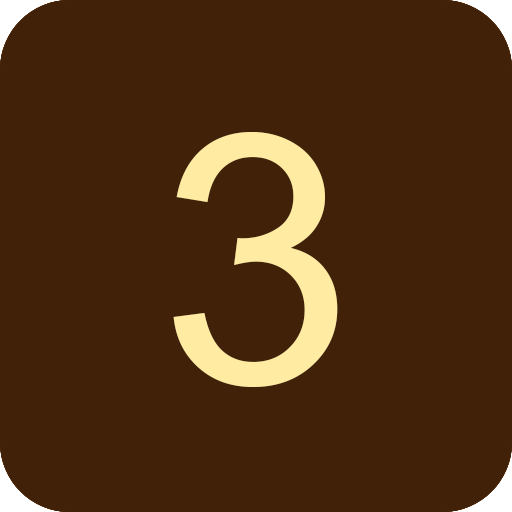
<style>
.page{position:relative;width:512px;height:512px;background:#412209}
.page>*{position:absolute;margin:0}
.t1{font:349px "ArialMT";color:#ffeba1}
</style>
<div class="page">
<p class="t1" style="left:173px;top:132px;width:165px;height:255px">3</p>
</div>
